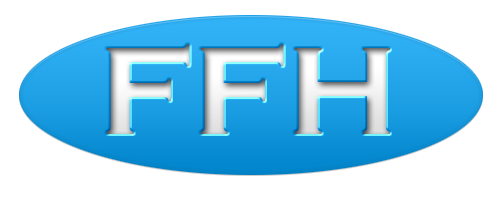
<style>
.page{position:relative;width:500px;height:200px;background:#ffffff}
.page>*{position:absolute;margin:0}
.t1{font:129px "CopperplateGothic-Bold"}
</style>
<div class="page">
<p class="t1" style="left:106px;top:44px;width:284px;height:90px">FFH</p>
</div>
